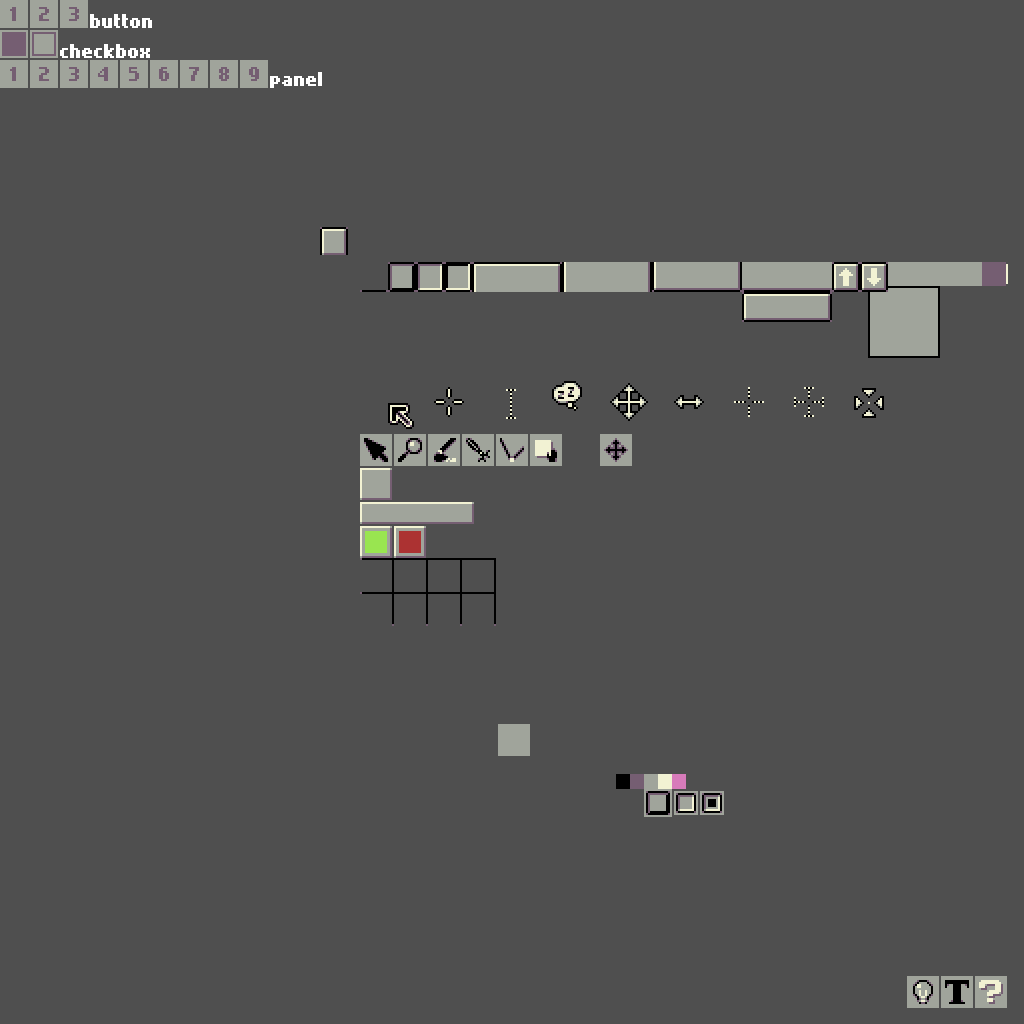
<style>
.page{position:relative;width:1024px;height:1024px;background:#4f4f4f}
.page>*{position:absolute;margin:0}
.t1{font:16px "NokiaCellphoneFC-Small";color:#ffffff}
</style>
<div class="page">
<p class="t1" style="left:90px;top:14px;width:62px;height:14px">button</p>
<p class="t1" style="left:60px;top:44px;width:90px;height:14px">checkbox</p>
<p class="t1" style="left:270px;top:72px;width:52px;height:16px">panel</p>
</div>
